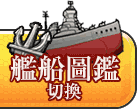
<style>
.page{position:relative;width:137px;height:109px;background:#ffffff}
.page>*{position:absolute;margin:0}
.t1{font:28px "RyuminPro-Bold";color:#f9f1ec}
.t2{font:18px "RyuminPro-Bold";color:#f9f1ec}
</style>
<div class="page">
<p class="t1" style="left:10px;top:55px;width:109px;height:27px">艦船圖鑑</p>
<p class="t2" style="left:47px;top:82px;width:34px;height:18px">切換</p>
</div>
